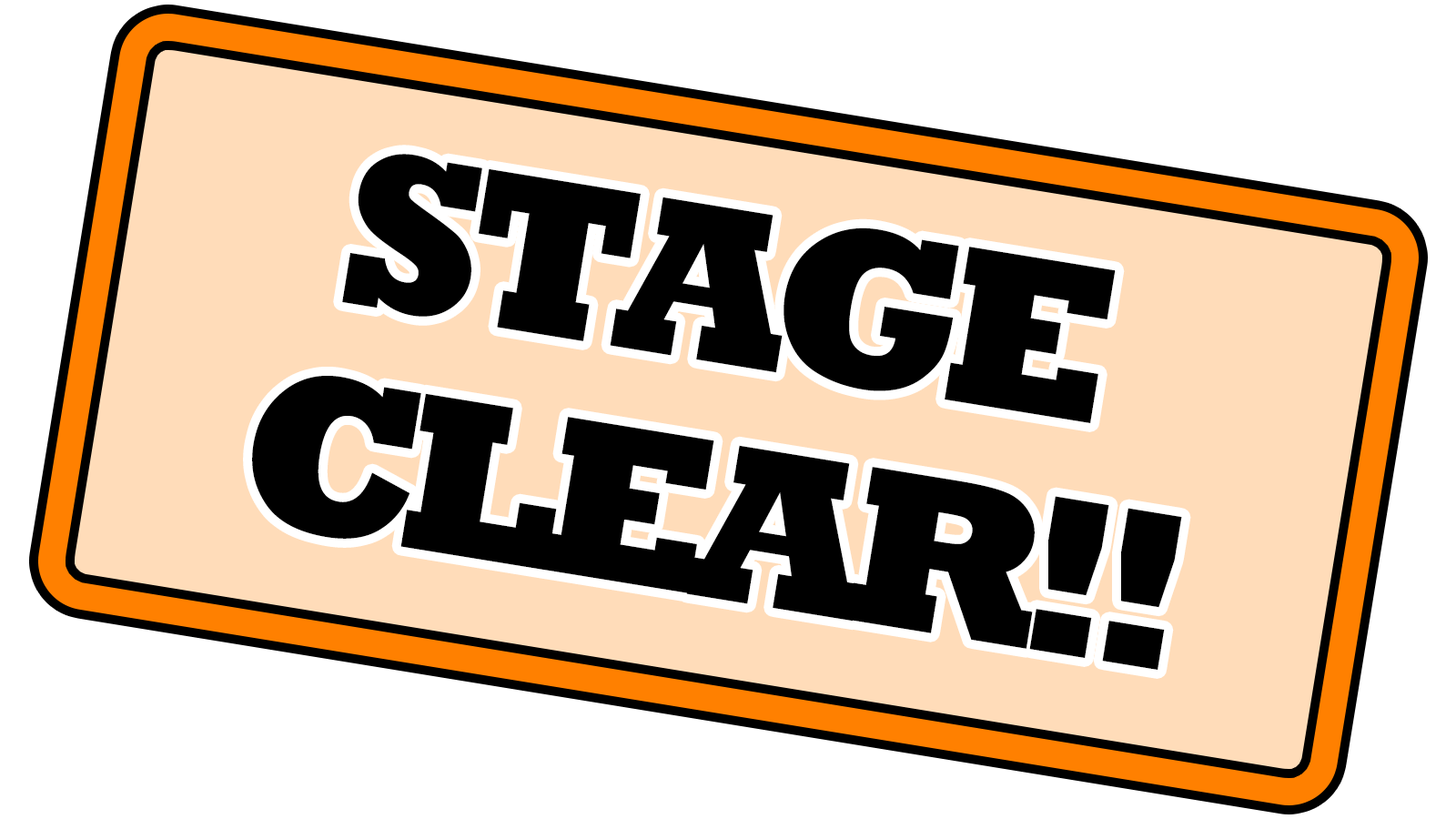
<style>
.page{position:relative;width:1456px;height:819px;background:#ffffff}
.page>*{position:absolute;margin:0}
.t1{font:227.5px "Rockwell-ExtraBold";letter-spacing:-0.075em;color:#000000}
</style>
<div class="page">
<p class="t1" style="left:342px;top:154px;width:774px;height:269px;rotate:9deg">STAGE</p>
<p class="t1" style="left:252px;top:376px;width:930px;height:294px;rotate:9deg">CLEAR!!</p>
</div>
